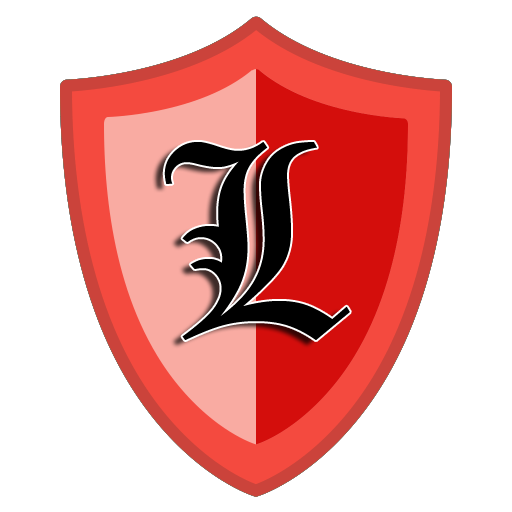
<style>
.page{position:relative;width:512px;height:512px;background:#ffffff}
.page>*{position:absolute;margin:0}
.t1{font:266.7px "OldEnglishTextMT";color:#000000}
</style>
<div class="page">
<p class="t1" style="left:164px;top:142px;width:186px;height:198px">L</p>
</div>
